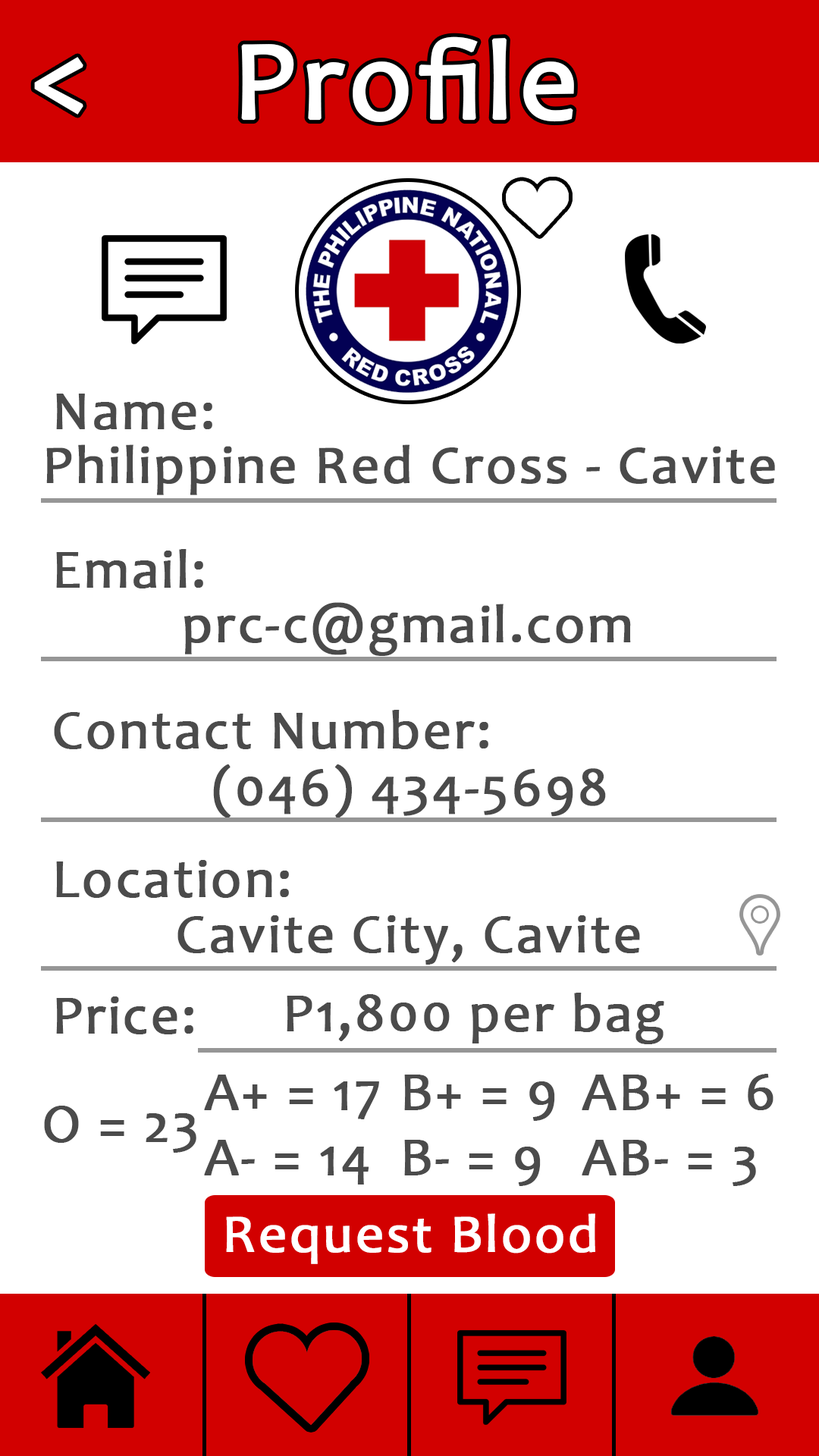
<style>
.page{position:relative;width:819px;height:1456px;background:#ffffff}
.page>*{position:absolute;margin:0}
.t1{font:113.4px "Candara";letter-spacing:0.03em;color:#ffffff;font-weight:bold}
.t2{font:113.7px "Candara";letter-spacing:0.03em;color:#ffffff;font-weight:bold}
.t3{font:54.6px "Candara";letter-spacing:0.03em;color:#4b4b4b;font-weight:bold}
.t4{font:54.3px "Candara";letter-spacing:0.03em;color:#4a4a4a;font-weight:bold}
.t5{font:54.6px "Candara";letter-spacing:0.03em;color:#4a4a4a;font-weight:bold}
.t6{font:54.3px "Candara";letter-spacing:0.03em;color:#ffffff;font-weight:bold}
</style>
<div class="page">
<p class="t1" style="left:241px;top:36px;width:333px;height:86px">Profile</p>
<p class="t2" style="left:34px;top:57px;width:49px;height:58px">&lt;</p>
<p class="t3" style="left:56px;top:394px;width:156px;height:36px">Name:</p>
<p class="t4" style="left:46px;top:444px;width:729px;height:51px">Philippine Red Cross - Cavite</p>
<p class="t3" style="left:56px;top:549px;width:147px;height:39px">Email:</p>
<p class="t4" style="left:184px;top:602px;width:447px;height:54px">prc-c@gmail.com</p>
<p class="t3" style="left:54px;top:710px;width:434px;height:39px">Contact Number:</p>
<p class="t4" style="left:213px;top:764px;width:393px;height:54px">(046) 434-5698</p>
<p class="t3" style="left:56px;top:860px;width:233px;height:38px">Location:</p>
<p class="t5" style="left:177px;top:915px;width:463px;height:50px">Cavite City, Cavite</p>
<p class="t3" style="left:56px;top:996px;width:137px;height:38px">Price:</p>
<p class="t3" style="left:287px;top:993px;width:377px;height:51px">P1,800 per bag</p>
<p class="t3" style="left:582px;top:1074px;width:191px;height:112px">AB+ = 6<br>AB- = 3</p>
<p class="t3" style="left:204px;top:1075px;width:175px;height:110px">A+ = 17<br>A- = 14</p>
<p class="t3" style="left:404px;top:1075px;width:151px;height:111px">B+ = 9<br>B- = 9</p>
<p class="t3" style="left:44px;top:1106px;width:152px;height:47px">O = 23</p>
<p class="t6" style="left:226px;top:1213px;width:369px;height:51px">Request Blood</p>
</div>
